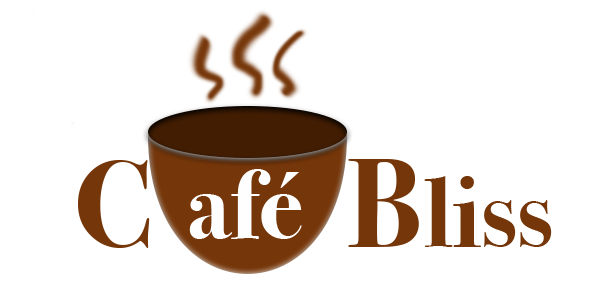
<style>
.page{position:relative;width:605px;height:300px;background:#ffffff}
.page>*{position:absolute;margin:0}
.t1{font:100px "BodoniSvtyTwoITCTT-Bold";color:#753609}
.t2{font:125px "BodoniSvtyTwoITCTT-Bold";color:#753609}
.t3{font:100px "BodoniSvtyTwoITCTT-Bold";color:#fefefe}
</style>
<div class="page">
<p class="t1" style="left:348px;top:159px;width:204px;height:88px"><span class="t2">B</span>liss</p>
<p class="t3" style="left:189px;top:169px;width:113px;height:70px">afé</p>
</div>
